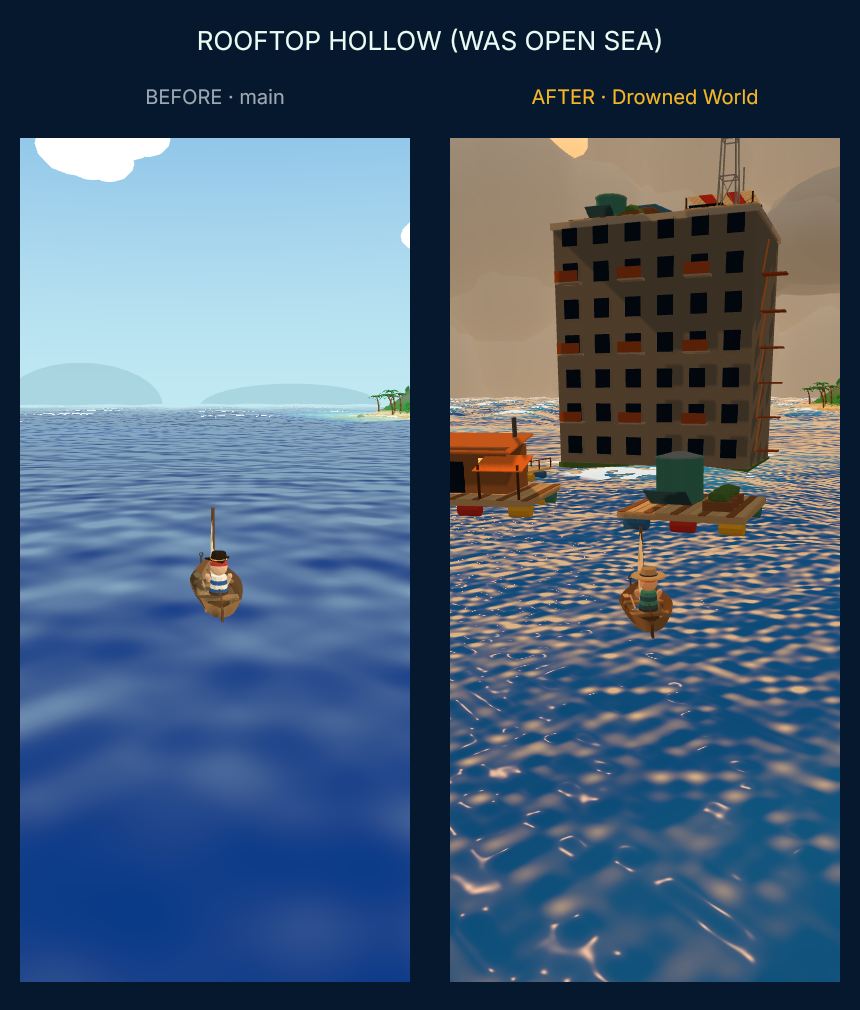
<style>
.page{position:relative;width:860px;height:1010px;background:#06182e}
.page>*{position:absolute;margin:0}
.t1{font:26px "Nunito-Regular";color:#e9fbf6}
.t2{font:20px "Nunito-Regular";color:#9aa9b4}
.t3{font:20px "Nunito-Regular";color:#f2b825}
</style>
<div class="page">
<p class="t1" style="left:197px;top:28px;width:465px;height:26px">ROOFTOP HOLLOW (WAS OPEN SEA)</p>
<p class="t2" style="left:146px;top:88px;width:139px;height:18px">BEFORE · main</p>
<p class="t3" style="left:531px;top:89px;width:227px;height:17px">AFTER · Drowned World</p>
</div>
